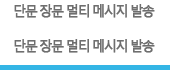
<style>
.page{position:relative;width:170px;height:70px;background:#ffffff}
.page>*{position:absolute;margin:0}
.t1{font:14px "MalgunGothicRegular";letter-spacing:-0.15em;color:#6e6e6e;font-weight:bold;scale:0.95 1}
</style>
<div class="page">
<p class="t1" style="left:14px;top:4px;width:141px;height:14px">단문 장문 멀티 메시지 발송</p>
<p class="t1" style="left:14px;top:39px;width:141px;height:14px">단문 장문 멀티 메시지 발송</p>
</div>
